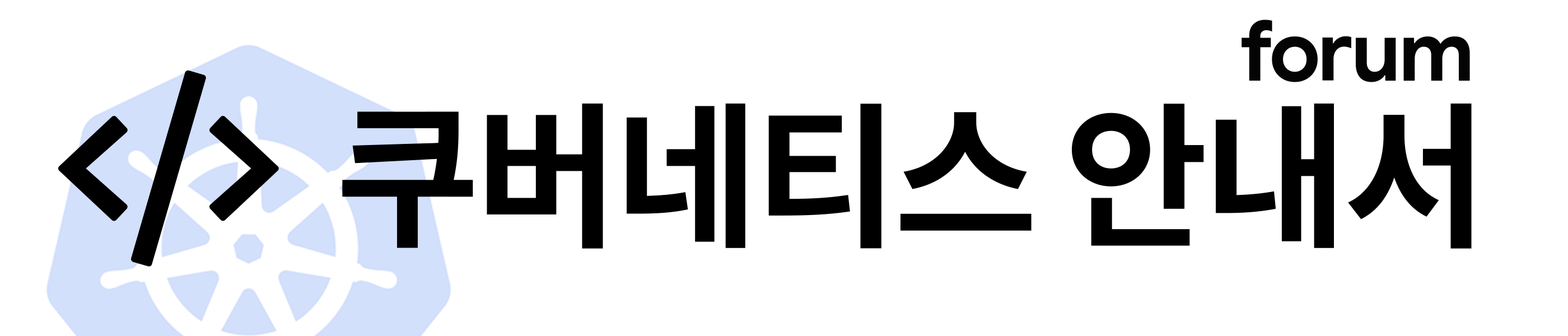
<style>
.page{position:relative;width:1568px;height:336px;background:#ffffff}
.page>*{position:absolute;margin:0}
.t1{font:84px "GoogleSans-Bold";letter-spacing:-0.03em;color:#040404}
.t2{font:156.8px "SpoqaHanSansNeo-Bold";letter-spacing:-0.03em;color:#000000}
</style>
<div class="page">
<p class="t1" style="left:1242px;top:20px;width:228px;height:62px">forum</p>
<p class="t2" style="left:342px;top:103px;width:1130px;height:146px">쿠버네티스 안내서</p>
</div>
